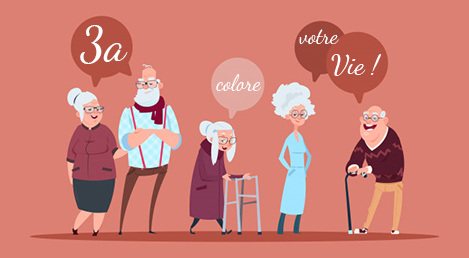
<style>
.page{position:relative;width:469px;height:258px;background:#dc8073}
.page>*{position:absolute;margin:0}
.t1{font:48px "DancingScript-Regular";color:#ffffff}
.t2{font:22px "DancingScript-Regular";color:#ffffff}
.t3{font:28px "DancingScript-Regular";color:#ffffff}
</style>
<div class="page">
<p class="t1" style="left:80px;top:25px;width:48px;height:39px">3a</p>
<p class="t2" style="left:299px;top:29px;width:40px;height:15px">votre</p>
<p class="t3" style="left:331px;top:54px;width:50px;height:22px">Vie !</p>
<p class="t2" style="left:216px;top:74px;width:46px;height:17px">colore</p>
</div>
